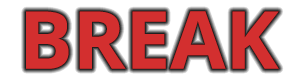
<style>
.page{position:relative;width:300px;height:80px;background:#ffffff}
.page>*{position:absolute;margin:0}
.t1{font:80px "OpenSans-Bold";color:#d32f2f}
</style>
<div class="page">
<p class="t1" style="left:26px;top:11px;width:253px;height:58px">BREAK</p>
</div>
